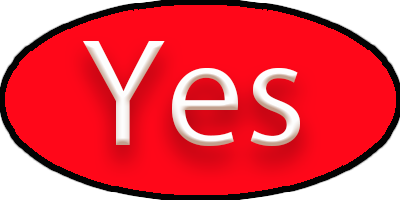
<style>
.page{position:relative;width:400px;height:200px;background:#ff0719}
.page>*{position:absolute;margin:0}
.t1{font:154.4px "MyriadPro-Regular";letter-spacing:0.01em;color:#fdfdfd}
</style>
<div class="page">
<p class="t1" style="left:83px;top:41px;width:217px;height:105px">Yes</p>
</div>
